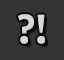
<style>
.page{position:relative;width:64px;height:60px;background:#333333}
.page>*{position:absolute;margin:0}
.t1{font:40.5px "MikadoMedium";color:#d7d7d7}
</style>
<div class="page">
<p class="t1" style="left:18px;top:14px;width:27px;height:30px">?!</p>
</div>
